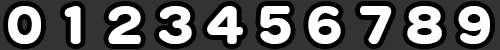
<style>
.page{position:relative;width:500px;height:50px;background:#333333}
.page>*{position:absolute;margin:0}
.t1{font:43.3px "NIS-R10P-83pv-RKSJ-H";color:#ffffff;scale:1.06 1}
.t2{font:44.5px "NIS-R10P-83pv-RKSJ-H";color:#ffffff;scale:1.03 1}
.t3{font:42.9px "NIS-R10P-83pv-RKSJ-H";color:#ffffff;scale:1.07 1}
.t4{font:43.4px "NIS-R10P-83pv-RKSJ-H";color:#ffffff;scale:1.06 1}
.t5{font:44.1px "NIS-R10P-83pv-RKSJ-H";color:#ffffff;scale:1.04 1}
.t6{font:44.7px "NIS-R10P-83pv-RKSJ-H";color:#ffffff}
.t7{font:42.3px "NIS-R10P-83pv-RKSJ-H";color:#ffffff;scale:1.08 1}
.t8{font:43.2px "NIS-R10P-83pv-RKSJ-H";color:#ffffff;scale:1.06 1}
</style>
<div class="page">
<p class="t1" style="left:8px;top:6px;width:33px;height:38px">0</p>
<p class="t1" style="left:64px;top:6px;width:17px;height:38px">1</p>
<p class="t2" style="left:108px;top:6px;width:33px;height:38px">2</p>
<p class="t3" style="left:159px;top:6px;width:33px;height:38px">3</p>
<p class="t4" style="left:207px;top:6px;width:36px;height:38px">4</p>
<p class="t5" style="left:260px;top:6px;width:31px;height:38px">5</p>
<p class="t1" style="left:308px;top:6px;width:33px;height:38px">6</p>
<p class="t6" style="left:360px;top:6px;width:32px;height:38px">7</p>
<p class="t7" style="left:407px;top:6px;width:35px;height:38px">8</p>
<p class="t8" style="left:458px;top:6px;width:32px;height:38px">9</p>
</div>
